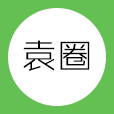
<style>
.page{position:relative;width:114px;height:114px;background:#ffffff}
.page>*{position:absolute;margin:0}
.t1{font:36px "ZHSRXT--GBK1-0";color:#000000}
</style>
<div class="page">
<p class="t1" style="left:23px;top:40px;width:67px;height:31px">袁圈</p>
</div>
